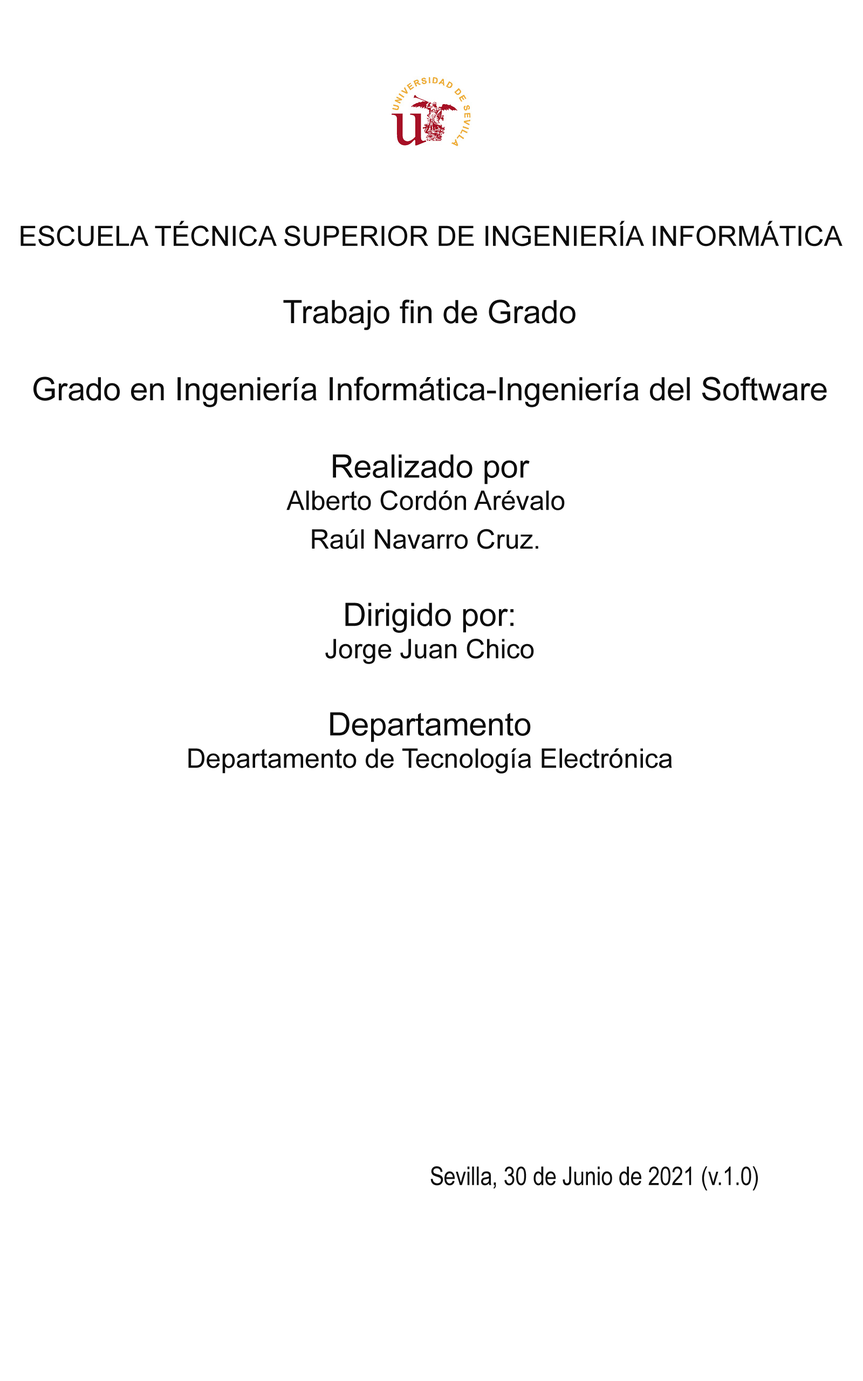
<style>
.page{position:relative;width:863px;height:1381px;background:#ffffff}
.page>*{position:absolute;margin:0}
.t1{font:32.2px "ArialMT";color:#0c0c0c}
.t2{font:27.9px "ArialMT";color:#0c0c0c}
.t3{font:27px "ArialMT";color:#0c0c0c}
.t4{font:25.8px "ArialNarrow";color:#0c0c0c}
</style>
<div class="page">
<p class="t1" style="left:21px;top:221px;width:822px;height:970px;text-align:center"><span class="t2">ESCUELA TÉCNICA SUPERIOR DE INGENIERÍA INFORMÁTICA<br></span><br>Trabajo fin de Grado<br><br>Grado en Ingeniería Informática-Ingeniería del Software<br><br>Realizado por<br><span class="t3">Alberto Cordón Arévalo <br>Raúl Navarro Cruz.</span> <br><br>Dirigido por:<br><span class="t3">Jorge Juan Chico<br></span><br>Departamento<br><span class="t3">Departamento de Tecnología Electrónica<br><br><br><br><br><br><br><br><br><br><br></span><span class="t4">Sevilla, 30 de Junio de 2021 (v.1.0)</span></p>
</div>
